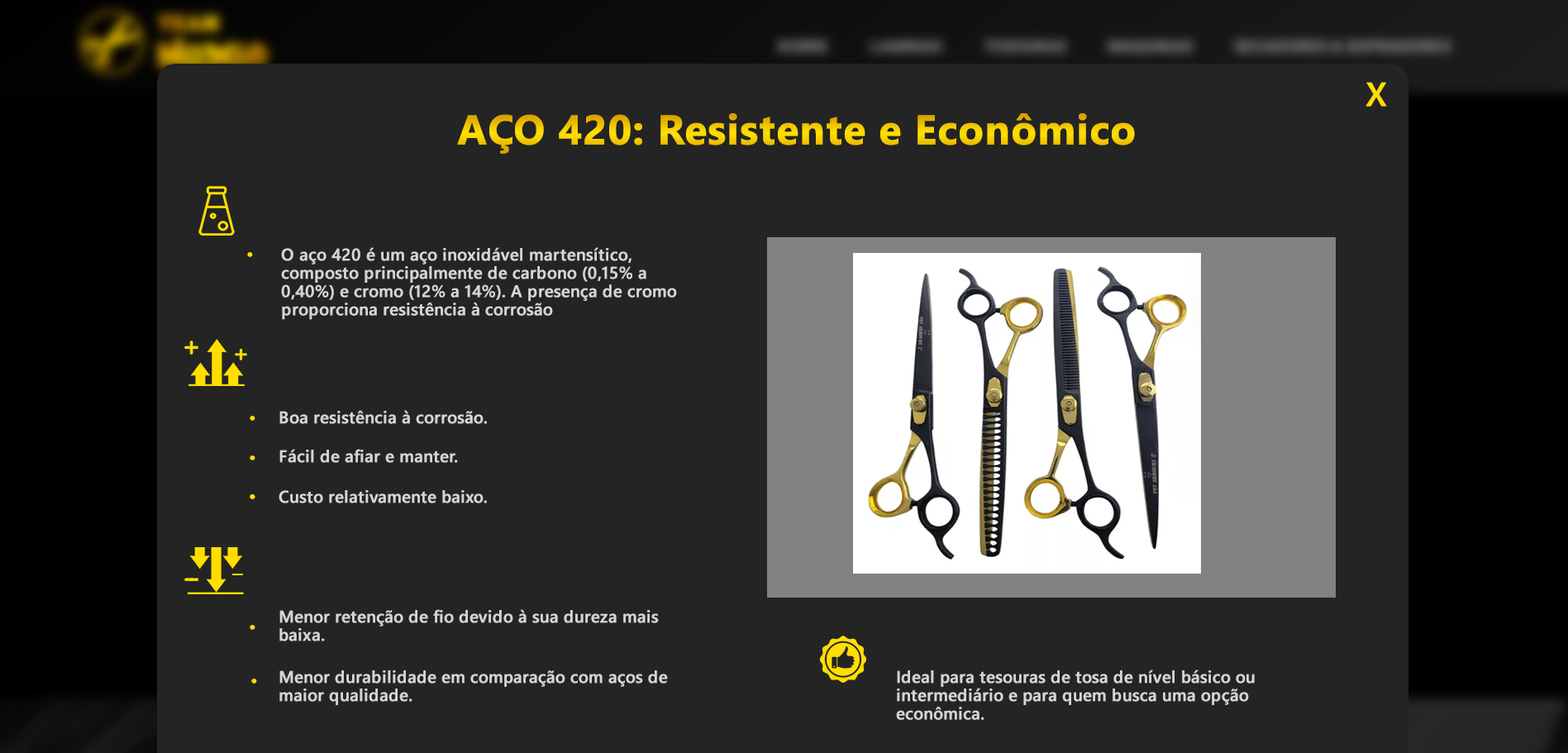
<style>
.page{position:relative;width:1568px;height:753px;background:#242424}
.page>*{position:absolute;margin:0}
.t1{font:33.4px "SegoeUI-Semibold";color:#ffde00;font-weight:bold}
.t2{font:41.7px "SegoeUI-Bold";color:#ffde00;font-weight:bold}
.t3{font:30.9px "SegoeUI-Semibold";color:#ffde00;font-weight:bold}
.t4{font:16.7px/18.2px "SegoeUI-Semibold";color:#d5d5d5;font-weight:bold}
.t5{font:16.7px "SegoeUI-Semibold";color:#d5d5d5;font-weight:bold}
</style>
<div class="page">
<p class="t1" style="left:1365px;top:82px;width:22px;height:25px">X</p>
<p class="t2" style="left:457px;top:113px;width:678px;height:41px">AÇO 420: Resistente e Econômico</p>
<p class="t3" style="left:247px;top:252px;width:6px;height:5px">.</p>
<p class="t4" style="left:281px;top:247px;width:396px;height:73px">O aço 420 é um aço inoxidável martensítico, composto principalmente de carbono (0,15% a 0,40%) e cromo (12% a 14%). A presença de cromo proporciona resistência à corrosão</p>
<p class="t5" style="left:279px;top:410px;width:208px;height:14px">Boa resistência à corrosão.</p>
<p class="t3" style="left:250px;top:416px;width:5px;height:5px">.</p>
<p class="t5" style="left:279px;top:449px;width:179px;height:14px">Fácil de afiar e manter.</p>
<p class="t3" style="left:250px;top:455px;width:5px;height:5px">.</p>
<p class="t3" style="left:250px;top:494px;width:5px;height:5px">.</p>
<p class="t3" style="left:250px;top:494px;width:5px;height:5px">.</p>
<p class="t5" style="left:279px;top:490px;width:208px;height:13px">Custo relativamente baixo.</p>
<p class="t4" style="left:279px;top:609px;width:380px;height:32px">Menor retenção de fio devido à sua dureza mais baixa.</p>
<p class="t3" style="left:250px;top:625px;width:5px;height:5px">.</p>
<p class="t4" style="left:279px;top:670px;width:389px;height:35px">Menor durabilidade em comparação com aços de maior qualidade.</p>
<p class="t4" style="left:896px;top:670px;width:359px;height:50px">Ideal para tesouras de tosa de nível básico ou intermediário e para quem busca uma opção econômica.</p>
<p class="t3" style="left:251px;top:679px;width:6px;height:5px">.</p>
</div>
